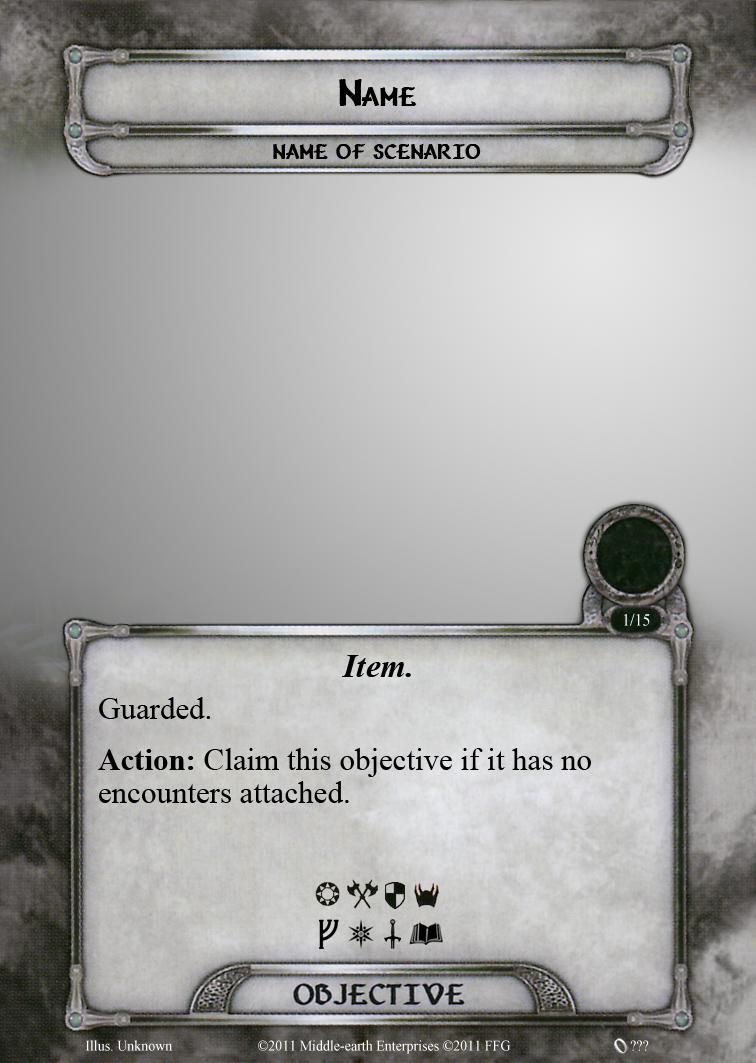
<style>
.page{position:relative;width:756px;height:1063px}
.page>*{position:absolute;margin:0}
.t1{font:37.5px "Vafthrudnir";letter-spacing:-0.002em;color:#000000;font-variant:small-caps}
.t2{font:29.2px "Vafthrudnir";letter-spacing:-0.006em;color:#000000;font-variant:small-caps}
.t3{font:16.7px "TimesNewRomanPSMT";color:#ffffff;scale:0.96 1}
.t4{font:33.3px "TimesNewRomanPS-BoldItalicMT";color:#000000}
.t5{font:31.2px "TimesNewRomanPSMT";color:#000000}
.t6{font:31.2px/33.3px "TimesNewRomanPSMT";color:#000000}
.t7{font:31.2px/33.3px "TimesNewRomanPS-BoldMT";color:#000000}
.t8{font:14.6px "TimesNewRomanPSMT";color:#ffffff;scale:0.96 1}
</style>
<div class="page">
<p class="t1" style="left:339px;top:79px;width:78px;height:27px">Name</p>
<p class="t2" style="left:273px;top:144px;width:208px;height:15px">name of scenario</p>
<p class="t3" style="left:624px;top:613px;width:26px;height:13px">1/15</p>
<p class="t4" style="left:341px;top:655px;width:70px;height:22px">Item.</p>
<p class="t5" style="left:99px;top:697px;width:111px;height:22px">Guarded.</p>
<p class="t6" style="left:98px;top:748px;width:493px;height:55px"><span class="t7">Action:</span> Claim this objective if it has no<br>encounters attached.</p>
<p class="t8" style="left:85px;top:1040px;width:88px;height:11px">Illus. Unknown</p>
<p class="t8" style="left:258px;top:1040px;width:253px;height:14px">©2011 Middle-earth Enterprises ©2011 FFG</p>
<p class="t8" style="left:630px;top:1040px;width:19px;height:11px">???</p>
</div>
